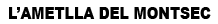
<style>
.page{position:relative;width:218px;height:24px;background:#ffffff}
.page>*{position:absolute;margin:0}
.t1{font:16.9px "Arial-Black";color:#000000;scale:0.83 1}
</style>
<div class="page">
<p class="t1" style="left:9px;top:7px;width:202px;height:12px">L’AMETLLA DEL MONTSEC</p>
</div>
